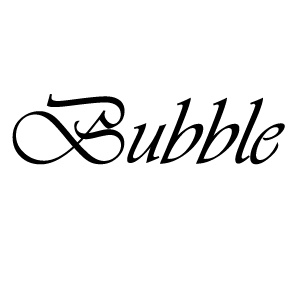
<style>
.page{position:relative;width:300px;height:300px;background:#ffffff}
.page>*{position:absolute;margin:0}
.t1{font:97.9px "Vivaldii";color:#000000}
</style>
<div class="page">
<p class="t1" style="left:12px;top:94px;width:273px;height:71px">Bubble</p>
</div>
